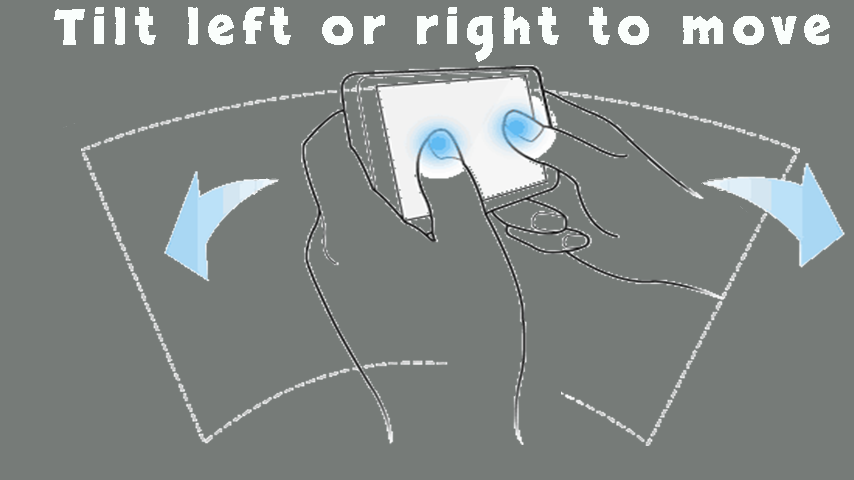
<style>
.page{position:relative;width:854px;height:480px;background:#767b78}
.page>*{position:absolute;margin:0}
.t1{font:48px "Skranji-Bold";letter-spacing:0.15em;color:#fafefc}
</style>
<div class="page">
<p class="t1" style="left:54px;top:7px;width:776px;height:55px">Tilt left or right to move</p>
</div>
